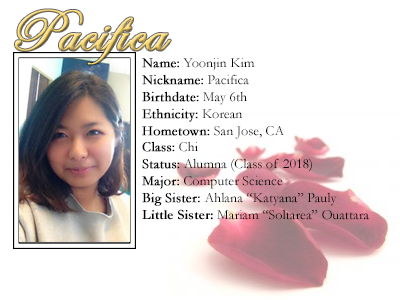
<style>
.page{position:relative;width:400px;height:300px;background:#ffffff}
.page>*{position:absolute;margin:0}
.t1{font:60px "EdwardianScriptITC";font-weight:bold}
.t2{font:14px "Garamond";color:#000000}
.t3{font:14px "Garamond";color:#000000;font-weight:bold}
.t4{font:14px "Garamond-Bold";color:#000000}
</style>
<div class="page">
<p class="t1" style="left:15px;top:9px;width:156px;height:56px">Pacifica</p>
<p class="t2" style="left:142px;top:57px;width:228px;height:163px"><span class="t3">Name:</span> Yoonjin Kim<br><span class="t3">Nickname:</span> Pacifica<br><span class="t3">Birthdate:</span> May 6th <br><span class="t3">Ethnicity:</span> Korean<br><span class="t3">Hometown:</span> San Jose, CA<br><span class="t3">Class:</span> Chi<br><span class="t3">Status:</span> Alumna (Class of 2018)<br><span class="t3">Major:</span> Computer Science<br><span class="t3">Big Sister: </span>Ahlana “Katyana” Pauly<br><span class="t4">Little Sister:</span> Mariam “Soltarea” Ouattara</p>
</div>
